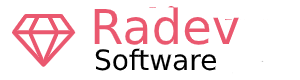
<style>
.page{position:relative;width:300px;height:80px;background:#ffffff}
.page>*{position:absolute;margin:0}
.t1{font:48px "DejaVuSans";color:#ea586f}
.t2{font:28px "DejaVuSans";color:#000000}
</style>
<div class="page">
<p class="t1" style="left:94px;top:7px;width:145px;height:38px">Radev</p>
<p class="t2" style="left:95px;top:48px;width:121px;height:23px">Software</p>
</div>
